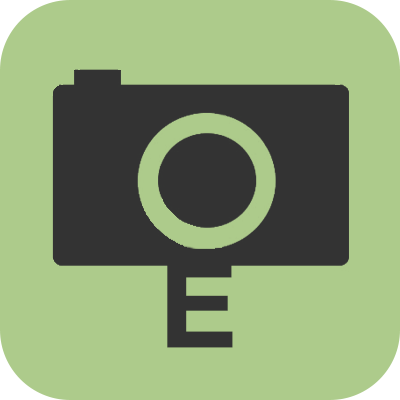
<style>
.page{position:relative;width:400px;height:400px;background:#adcb8b}
.page>*{position:absolute;margin:0}
.t1{font:119.9px "HelveticaNeue-Bold";color:#333333}
</style>
<div class="page">
<p class="t1" style="left:167px;top:261px;width:66px;height:87px">E</p>
</div>
